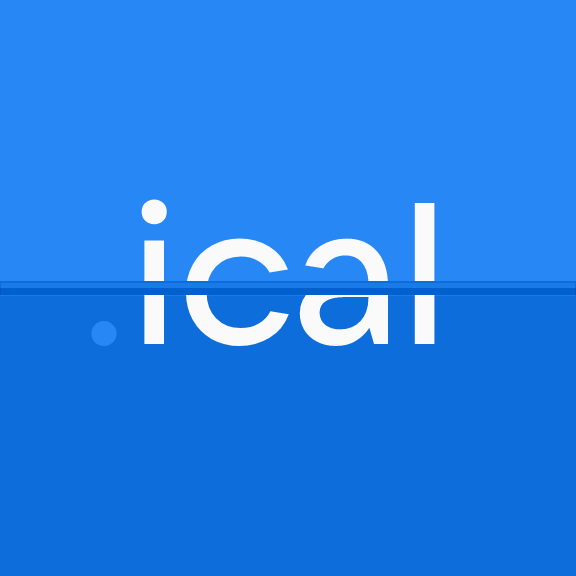
<style>
.page{position:relative;width:576px;height:576px;background:#2787f5}
.page>*{position:absolute;margin:0}
.t1{font:200px "VKSansDisplay-Medium";color:#fafafa}
.t2{font:200px "VKSansDisplay-Medium";color:#2787f5}
</style>
<div class="page">
<p class="t1" style="left:91px;top:199px;width:344px;height:147px"><span class="t2">.</span>ical</p>
</div>
